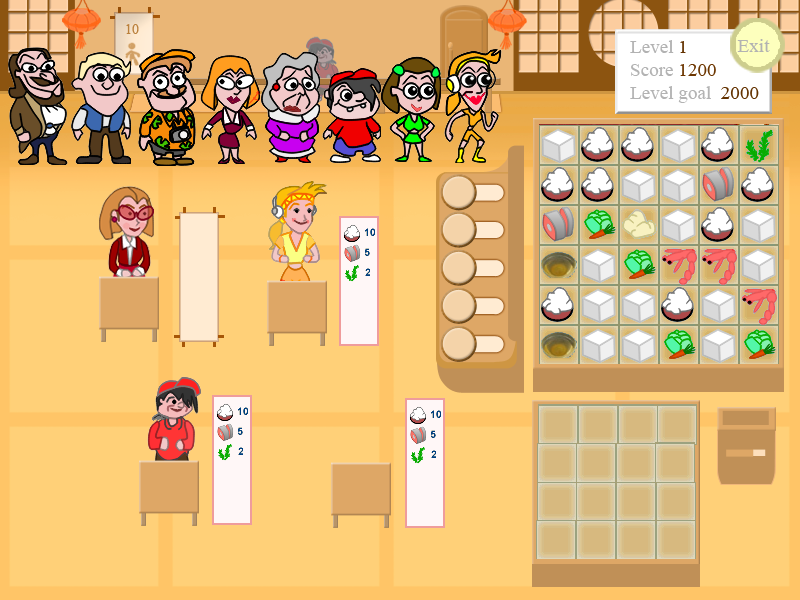
<style>
.page{position:relative;width:800px;height:600px;background:#ffd078}
.page>*{position:absolute;margin:0}
.t1{font:14px "TimesNewRomanPSMT";color:#ba803c}
.t2{font:19.1px "TimesNewRomanPSMT";color:#b3b3b3}
.t3{font:19.1px "TimesNewRomanPSMT";color:#b2b2b2}
.t4{font:19.1px "TimesNewRomanPSMT";color:#633200}
.t5{font:19.1px "TimesNewRomanPSMT";color:#6c3600}
</style>
<div class="page">
<p class="t1" style="left:126px;top:24px;width:13px;height:10px">10</p>
<p class="t2" style="left:630px;top:40px;width:129px;height:63px"><span class="t3">Level </span><span class="t4">1<br></span>Score <span class="t5">1200<br></span>Level goal  <span class="t4">2000</span></p>
<p class="t3" style="left:737px;top:39px;width:33px;height:13px">Exit</p>
</div>
